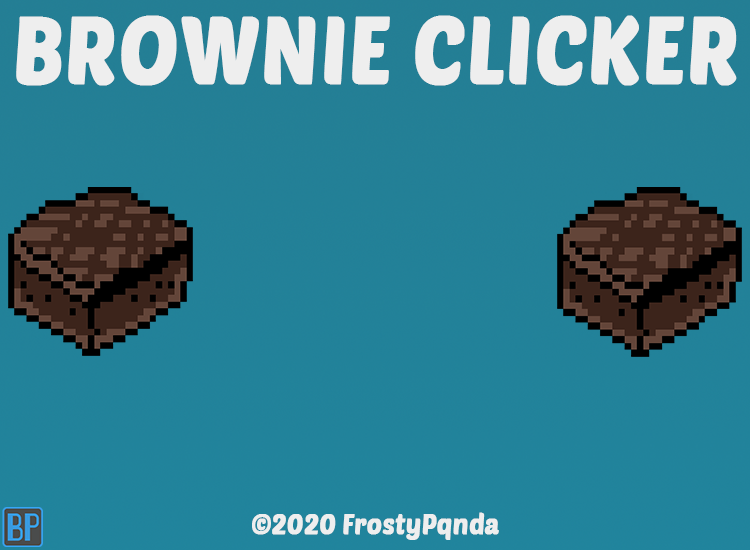
<style>
.page{position:relative;width:750px;height:550px}
.page>*{position:absolute;margin:0}
.t1{font:91.7px "PoetsenOne-Regular";color:#eeeeee;font-weight:bold;scale:0.91 1}
.t2{font:27.5px "PoetsenOne-Regular";color:#eeeeee;font-weight:bold;scale:0.91 1}
</style>
<div class="page">
<p class="t1" style="left:16px;top:15px;width:721px;height:71px">BROWNIE CLICKER</p>
<p class="t2" style="left:252px;top:512px;width:247px;height:28px">©2020 FrostyPqnda</p>
</div>
